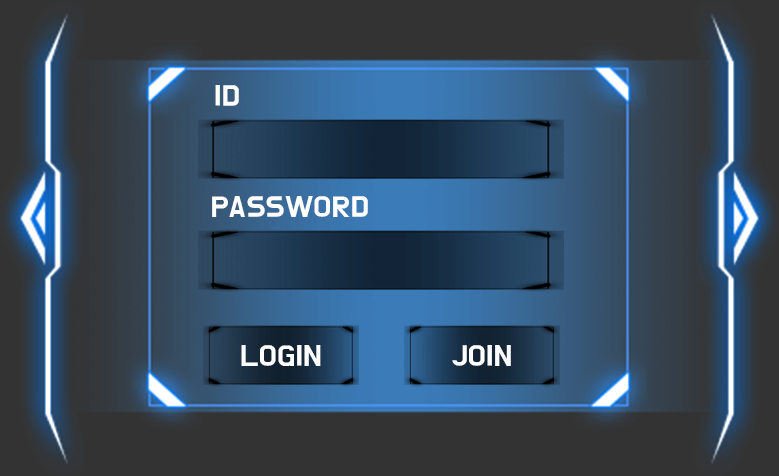
<style>
.page{position:relative;width:779px;height:476px;background:#333333}
.page>*{position:absolute;margin:0}
.t1{font:24px "BMDoHyeon";color:#ffffff;scale:1.1 1}
</style>
<div class="page">
<p class="t1" style="left:215px;top:85px;width:24px;height:21px">ID</p>
<p class="t1" style="left:212px;top:196px;width:156px;height:21px">PASSWORD</p>
<p class="t1" style="left:241px;top:345px;width:80px;height:21px">LOGIN</p>
<p class="t1" style="left:452px;top:345px;width:59px;height:21px">JOIN</p>
</div>
